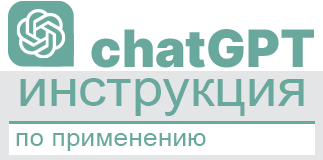
<style>
.page{position:relative;width:323px;height:160px;background:#ffffff}
.page>*{position:absolute;margin:0}
.t1{font:51.6px "Inter-Black";color:#69a99d}
.t2{font:50.7px "ArialMT";color:#69a99d;scale:1.1 1}
.t3{font:24.9px "ArialMT";color:#69a99d;scale:1.07 1}
</style>
<div class="page">
<p class="t1" style="left:91px;top:29px;width:223px;height:39px">chatGPT</p>
<p class="t2" style="left:20px;top:78px;width:284px;height:38px">инструкция</p>
<p class="t3" style="left:16px;top:133px;width:190px;height:18px">по применению</p>
</div>
